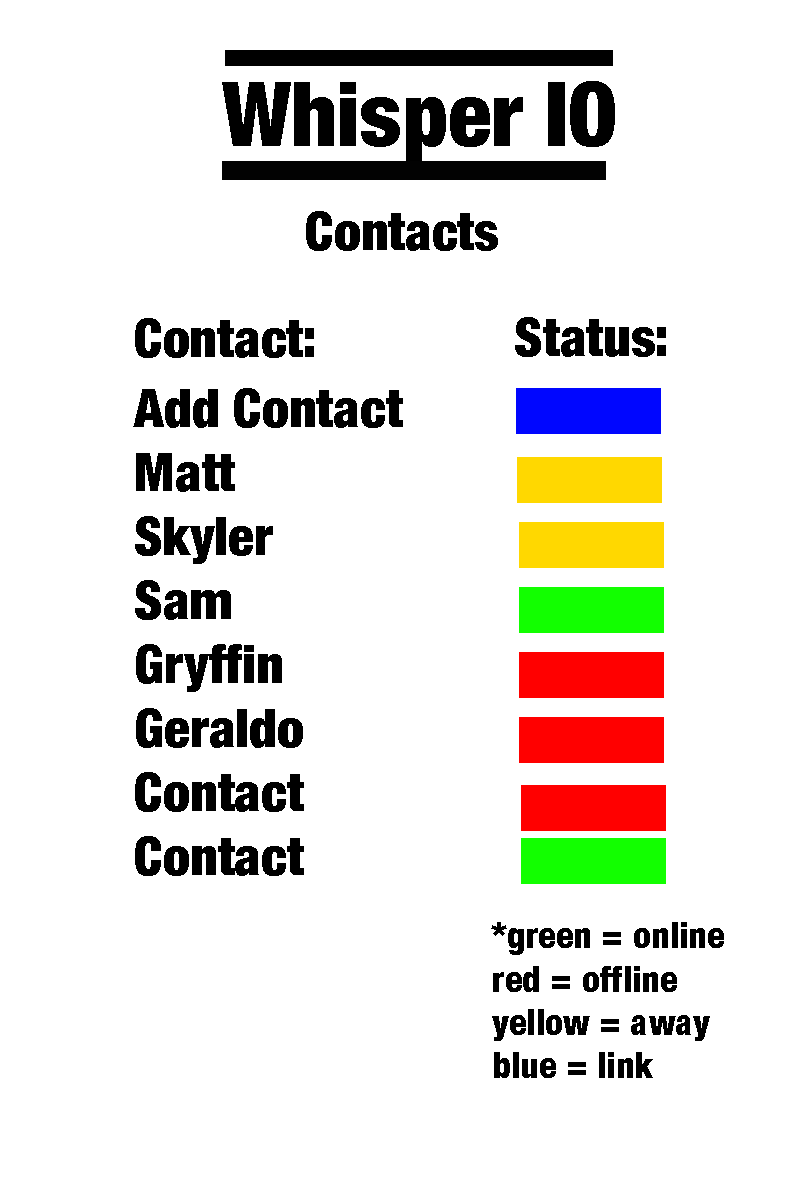
<style>
.page{position:relative;width:800px;height:1200px;background:#ffffff}
.page>*{position:absolute;margin:0}
.t1{font:53.3px "HelveticaNeue-CondensedBlack";color:#000000}
.t2{font:36.2px "HelveticaNeue-CondensedBlack";color:#000000}
</style>
<div class="page">
<p class="t1" style="left:306px;top:211px;width:192px;height:40px">Contacts</p>
<p class="t1" style="left:135px;top:318px;width:179px;height:40px">Contact:</p>
<p class="t1" style="left:515px;top:317px;width:151px;height:40px">Status:</p>
<p class="t1" style="left:133px;top:388px;width:270px;height:488px">Add Contact<br>Matt<br>Skyler<br>Sam<br>Gryffin<br>Geraldo<br>Contact<br>Contact</p>
<p class="t2" style="left:491px;top:922px;width:233px;height:156px">*green = online <br>red = offline <br>yellow = away<br>blue = link</p>
</div>
